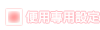
<style>
.page{position:relative;width:100px;height:30px;background:#ffffff}
.page>*{position:absolute;margin:0}
.t1{font:12px "AdobeFanHeitiStd-Bold";color:#fffcfc;font-weight:bold}
</style>
<div class="page">
<p class="t1" style="left:26px;top:11px;width:74px;height:12px">便用專用設定</p>
</div>
